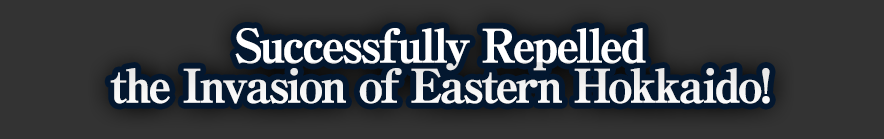
<style>
.page{position:relative;width:884px;height:139px;background:#333333}
.page>*{position:absolute;margin:0}
.t1{font:46px/40px "RyuminPro-ExBold";letter-spacing:-0.08em;color:#ffffff;font-weight:bold}
</style>
<div class="page">
<p class="t1" style="left:110px;top:28px;width:660px;height:76px;text-align:center">Successfully Repelled<br>the Invasion of Eastern Hokkaido!</p>
</div>
